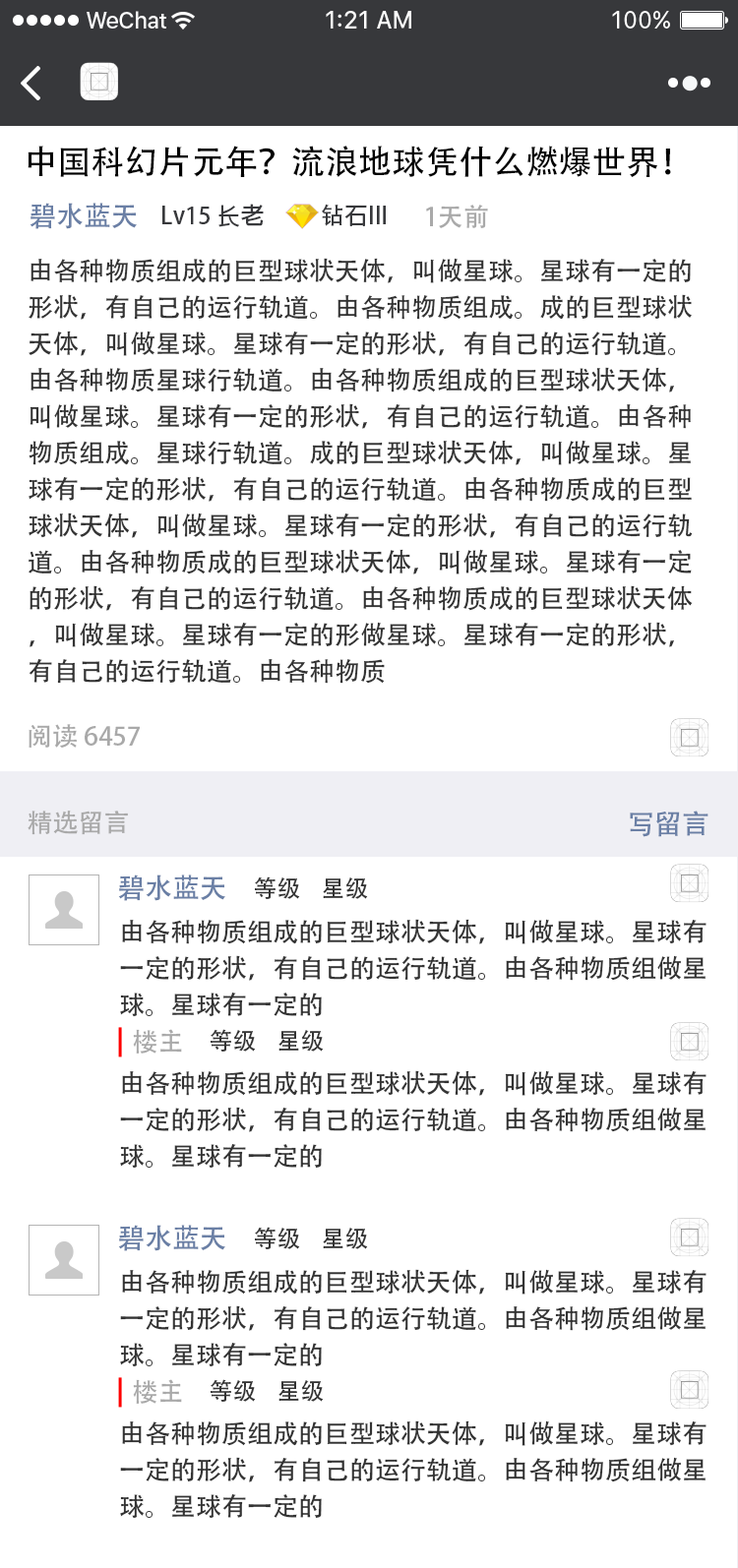
<style>
.page{position:relative;width:738px;height:1568px;background:#ffffff}
.page>*{position:absolute;margin:0}
.t1{font:33.4px "AdobeHeitiStd-Regular";color:#000000}
.t2{font:27.7px "AdobeHeitiStd-Regular";color:#6a7fa5}
.t3{font:23.6px "AdobeHeitiStd-Regular";color:#37383b}
.t4{font:25.6px "AdobeHeitiStd-Regular";color:#a9a9a9}
.t5{font:25.6px/36.4px "AdobeHeitiStd-Regular";color:#333333}
.t6{font:23.6px "AdobeHeitiStd-Regular";color:#333333}
</style>
<div class="page">
<p class="t1" style="left:28px;top:146px;width:643px;height:31px">中国科幻片元年？流浪地球凭什么燃爆世界！</p>
<p class="t2" style="left:30px;top:203px;width:107px;height:26px">碧水蓝天</p>
<p class="t3" style="left:162px;top:204px;width:102px;height:23px">Lv15 长老</p>
<p class="t3" style="left:322px;top:204px;width:64px;height:22px">钻石III</p>
<p class="t4" style="left:426px;top:205px;width:62px;height:23px">1天前</p>
<p class="t5" style="left:29px;top:258px;width:664px;height:426px">由各种物质组成的巨型球状天体，叫做星球。星球有一定的形状，有自己的运行轨道。由各种物质组成。成的巨型球状天体，叫做星球。星球有一定的形状，有自己的运行轨道。由各种物质星球行轨道。由各种物质组成的巨型球状天体，叫做星球。星球有一定的形状，有自己的运行轨道。由各种物质组成。星球行轨道。成的巨型球状天体，叫做星球。星球有一定的形状，有自己的运行轨道。由各种物质成的巨型球状天体，叫做星球。星球有一定的形状，有自己的运行轨道。由各种物质成的巨型球状天体，叫做星球。星球有一定的形状，有自己的运行轨道。由各种物质成的巨型球状天体，叫做星球。星球有一定的形做星球。星球有一定的形状，有自己的运行轨道。由各种物质</p>
<p class="t4" style="left:29px;top:724px;width:111px;height:25px">阅读 6457</p>
<p class="t4" style="left:28px;top:811px;width:100px;height:24px">精选留言</p>
<p class="t2" style="left:630px;top:811px;width:78px;height:26px">写留言</p>
<p class="t2" style="left:118px;top:874px;width:107px;height:27px">碧水蓝天</p>
<p class="t6" style="left:255px;top:876px;width:45px;height:23px">等级</p>
<p class="t6" style="left:323px;top:877px;width:45px;height:22px">星级</p>
<p class="t5" style="left:120px;top:919px;width:586px;height:98px">由各种物质组成的巨型球状天体，叫做星球。星球有一定的形状，有自己的运行轨道。由各种物质组做星球。星球有一定的</p>
<p class="t4" style="left:133px;top:1029px;width:49px;height:25px">楼主</p>
<p class="t6" style="left:211px;top:1029px;width:45px;height:23px">等级</p>
<p class="t6" style="left:278px;top:1030px;width:46px;height:22px">星级</p>
<p class="t5" style="left:120px;top:1070px;width:586px;height:99px">由各种物质组成的巨型球状天体，叫做星球。星球有一定的形状，有自己的运行轨道。由各种物质组做星球。星球有一定的</p>
<p class="t2" style="left:118px;top:1225px;width:107px;height:26px">碧水蓝天</p>
<p class="t6" style="left:255px;top:1227px;width:45px;height:22px">等级</p>
<p class="t6" style="left:323px;top:1228px;width:45px;height:21px">星级</p>
<p class="t5" style="left:120px;top:1269px;width:586px;height:98px">由各种物质组成的巨型球状天体，叫做星球。星球有一定的形状，有自己的运行轨道。由各种物质组做星球。星球有一定的</p>
<p class="t4" style="left:133px;top:1379px;width:49px;height:25px">楼主</p>
<p class="t6" style="left:211px;top:1379px;width:45px;height:23px">等级</p>
<p class="t6" style="left:278px;top:1380px;width:46px;height:22px">星级</p>
<p class="t5" style="left:120px;top:1420px;width:586px;height:99px">由各种物质组成的巨型球状天体，叫做星球。星球有一定的形状，有自己的运行轨道。由各种物质组做星球。星球有一定的</p>
</div>
